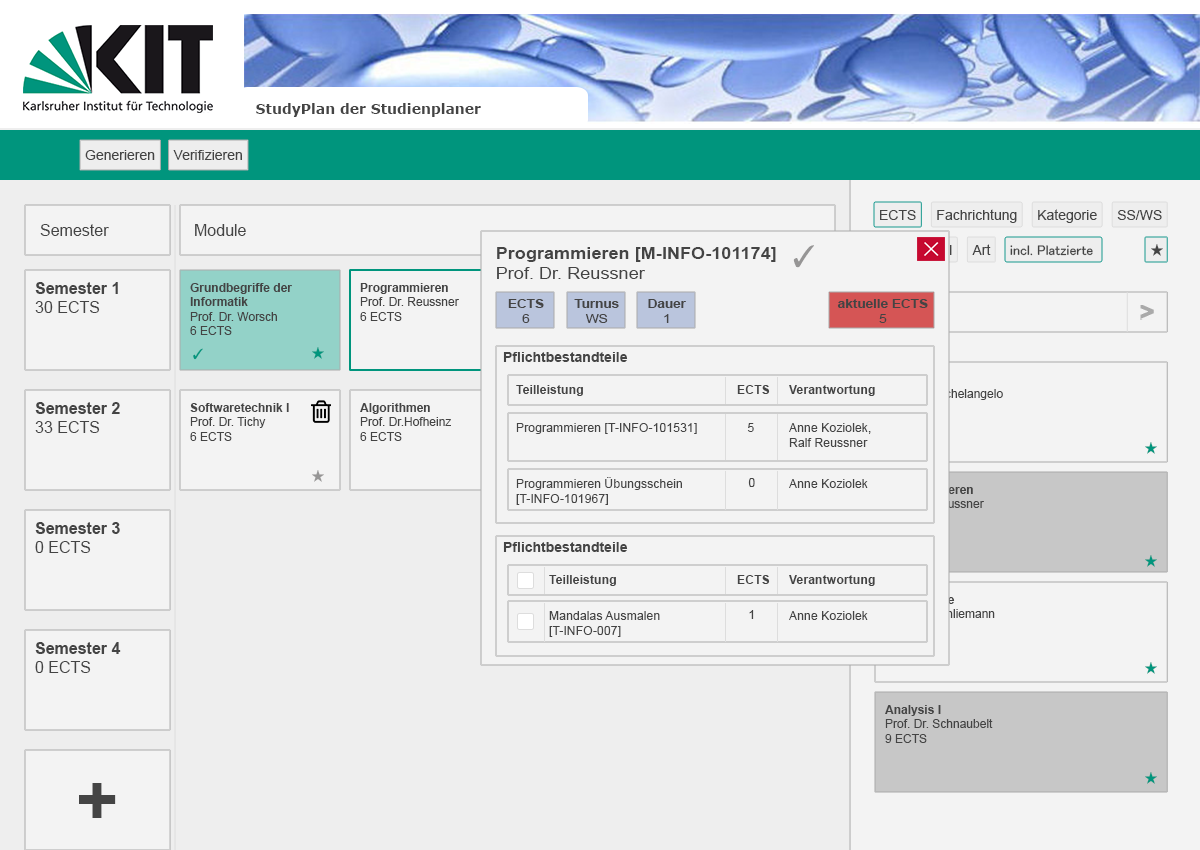
<style>
.page{position:relative;width:1200px;height:850px;background:#f3f3f3}
.page>*{position:absolute;margin:0}
.t1{font:14px "Verdana-Bold";color:#444444}
.t2{font:14px "ArialMT";color:#444444}
.t3{font:16px "ArialMT";color:#444444}
.t4{font:30px "MS-PGothic";color:#969595}
.t5{font:14px "MS-PGothic";color:#444444}
.t6{font:16px "Arial-BoldMT";color:#444444;scale:1.13 1}
.t7{font:16px "ArialMT";color:#444444;scale:1.13 1}
.t8{font:16px "Arial-BoldMT";color:#444444}
.t9{font:12px "Arial-BoldMT";color:#444444}
.t10{font:12px "ArialMT";color:#444444}
.t11{font:12px "Arial-BoldMT";color:#444444;scale:1.13 1}
.t12{font:12px "ArialMT";color:#444444;scale:1.13 1}
.t13{font:14px "MS-PGothic";color:#00957d}
.t14{font:14px "Arial-BoldMT";color:#444444}
.t15{font:12px "ArialMT"}
.t16{font:12px "Arial-BoldMT"}
.t17{font:12.4px "Arial-BoldMT";color:#444444}
.t18{font:12.4px "ArialMT";color:#444444}
.t19{font:14px "MS-PGothic";color:#969595}
</style>
<div class="page">
<p class="t1" style="left:256px;top:103px;width:225px;height:14px">StudyPlan der Studienplaner</p>
<p class="t2" style="left:85px;top:150px;width:70px;height:10px">Generieren</p>
<p class="t2" style="left:173px;top:150px;width:69px;height:10px">Verifizieren</p>
<p class="t2" style="left:937px;top:209px;width:80px;height:14px">Fachrichtung</p>
<p class="t2" style="left:1038px;top:209px;width:59px;height:14px">Kategorie</p>
<p class="t2" style="left:880px;top:210px;width:36px;height:10px">ECTS</p>
<p class="t2" style="left:1117px;top:210px;width:45px;height:10px">SS/WS</p>
<p class="t3" style="left:40px;top:224px;width:69px;height:12px">Semester</p>
<p class="t3" style="left:195px;top:224px;width:51px;height:12px">Module</p>
<p class="t4" style="left:793px;top:245px;width:21px;height:23px">✓</p>
<p class="t2" style="left:972px;top:244px;width:19px;height:11px">Art</p>
<p class="t5" style="left:1010px;top:245px;width:83px;height:11px">incl. Platzierte</p>
<p class="t5" style="left:1151px;top:244px;width:12px;height:12px">★</p>
<p class="t6" style="left:497px;top:247px;width:279px;height:32px">Programmieren [M-INFO-101174]<br><span class="t7">Prof. Dr. Reussner</span></p>
<p class="t8" style="left:35px;top:282px;width:83px;height:31px">Semester 1<br><span class="t3">30 ECTS</span></p>
<p class="t9" style="left:190px;top:283px;width:102px;height:52px">Grundbegriffe der<br>Informatik<br><span class="t10">Prof. Dr. Worsch<br>6 ECTS</span></p>
<p class="t10" style="left:360px;top:283px;width:99px;height:38px"><span class="t9">Programmieren<br></span>Prof. Dr. Reussner<br>6 ECTS</p>
<p class="t11" style="left:508px;top:299px;width:36px;height:24px;text-align:center">ECTS<br><span class="t12">6</span></p>
<p class="t11" style="left:574px;top:299px;width:45px;height:24px;text-align:center">Turnus<br><span class="t12">WS</span></p>
<p class="t11" style="left:648px;top:299px;width:38px;height:24px;text-align:center">Dauer<br><span class="t12">1</span></p>
<p class="t11" style="left:837px;top:299px;width:91px;height:24px;text-align:center">aktuelle ECTS<br><span class="t12">5</span></p>
<p class="t13" style="left:193px;top:348px;width:10px;height:12px">✓</p>
<p class="t13" style="left:312px;top:347px;width:12px;height:12px">★</p>
<p class="t14" style="left:503px;top:352px;width:125px;height:10px">Pflichtbestandteile</p>
<p class="t15" style="left:885px;top:375px;width:118px;height:38px"><span class="t16">Architektur<br></span>Prof. Dr. Michelangelo<br>6 ECTS</p>
<p class="t17" style="left:516px;top:385px;width:67px;height:11px">Teilleistung</p>
<p class="t17" style="left:737px;top:385px;width:33px;height:9px">ECTS</p>
<p class="t17" style="left:789px;top:385px;width:86px;height:11px">Verantwortung</p>
<p class="t8" style="left:35px;top:402px;width:85px;height:31px">Semester 2<br><span class="t3">33 ECTS</span></p>
<p class="t10" style="left:190px;top:403px;width:99px;height:38px"><span class="t9">Softwaretechnik I<br></span>Prof. Dr. Tichy<br>6 ECTS</p>
<p class="t10" style="left:360px;top:403px;width:91px;height:38px"><span class="t9">Algorithmen<br></span>Prof. Dr.Hofheinz<br>6 ECTS</p>
<p class="t18" style="left:516px;top:423px;width:181px;height:11px">Programmieren [T-INFO-101531]</p>
<p class="t18" style="left:747px;top:423px;width:7px;height:9px">5</p>
<p class="t18" style="left:789px;top:423px;width:82px;height:24px">Anne Koziolek,<br>Ralf Reussner</p>
<p class="t13" style="left:1145px;top:442px;width:12px;height:12px">★</p>
<p class="t19" style="left:312px;top:470px;width:12px;height:12px">★</p>
<p class="t18" style="left:516px;top:477px;width:166px;height:28px">Programmieren Übungsschein <br>[T-INFO-101967]</p>
<p class="t18" style="left:748px;top:478px;width:7px;height:9px">0</p>
<p class="t18" style="left:789px;top:479px;width:79px;height:9px">Anne Koziolek</p>
<p class="t8" style="left:35px;top:522px;width:85px;height:31px">Semester 3<br><span class="t3">0 ECTS</span></p>
<p class="t14" style="left:503px;top:542px;width:125px;height:10px">Pflichtbestandteile</p>
<p class="t13" style="left:1145px;top:555px;width:12px;height:12px">★</p>
<p class="t17" style="left:549px;top:575px;width:67px;height:11px">Teilleistung</p>
<p class="t17" style="left:737px;top:575px;width:33px;height:9px">ECTS</p>
<p class="t17" style="left:789px;top:575px;width:86px;height:11px">Verantwortung</p>
<p class="t15" style="left:885px;top:595px;width:110px;height:38px"><span class="t16">Archäologie<br></span>Prof. Dr. Schliemann<br>20 ECTS</p>
<p class="t18" style="left:549px;top:611px;width:111px;height:26px">Mandalas Ausmalen <br>[T-INFO-007]</p>
<p class="t18" style="left:749px;top:610px;width:5px;height:9px">1</p>
<p class="t18" style="left:789px;top:611px;width:79px;height:9px">Anne Koziolek</p>
<p class="t8" style="left:35px;top:642px;width:86px;height:31px">Semester 4<br><span class="t3">0 ECTS</span></p>
<p class="t13" style="left:1145px;top:662px;width:12px;height:12px">★</p>
<p class="t10" style="left:885px;top:705px;width:108px;height:38px"><span class="t9">Analysis I<br></span>Prof. Dr. Schnaubelt<br>9 ECTS</p>
<p class="t13" style="left:1145px;top:772px;width:12px;height:12px">★</p>
</div>
